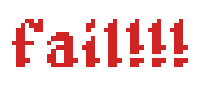
<style>
.page{position:relative;width:200px;height:86px;background:#ffffff}
.page>*{position:absolute;margin:0}
.t1{font:70px "Alagard";color:#d02323}
</style>
<div class="page">
<p class="t1" style="left:12px;top:19px;width:176px;height:48px">fail!!!</p>
</div>
